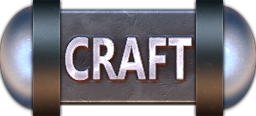
<style>
.page{position:relative;width:256px;height:116px}
.page>*{position:absolute;margin:0}
.t1{font:58.6px "SegoeUI-Bold";scale:0.71 1}
</style>
<div class="page">
<p class="t1" style="left:65px;top:37px;width:127px;height:43px">CRAFT</p>
<p class="t1" style="left:65px;top:37px;width:127px;height:43px">CRAFT</p>
</div>
